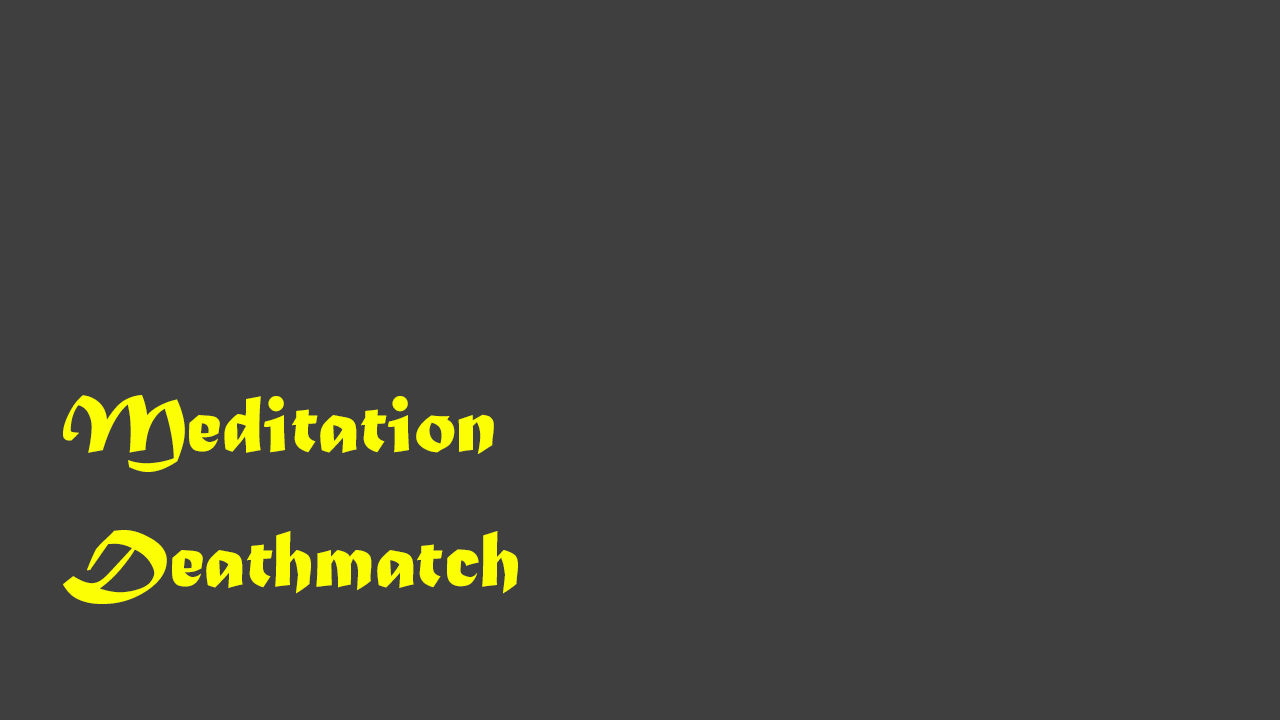
<style>
.page{position:relative;width:1280px;height:720px;background:#3f3f3f}
.page>*{position:absolute;margin:0}
.t1{font:85px/135px "MaturaMTScriptCapitals";color:#fcff03}
</style>
<div class="page">
<p class="t1" style="left:63px;top:395px;width:455px;height:209px">Meditation<br>Deathmatch</p>
</div>
